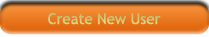
<style>
.page{position:relative;width:209px;height:37px}
.page>*{position:absolute;margin:0}
.t1{font:15px "TrebuchetMS";color:#ccc978}
</style>
<div class="page">
<p class="t1" style="left:48px;top:13px;width:113px;height:12px">Create New User</p>
</div>
